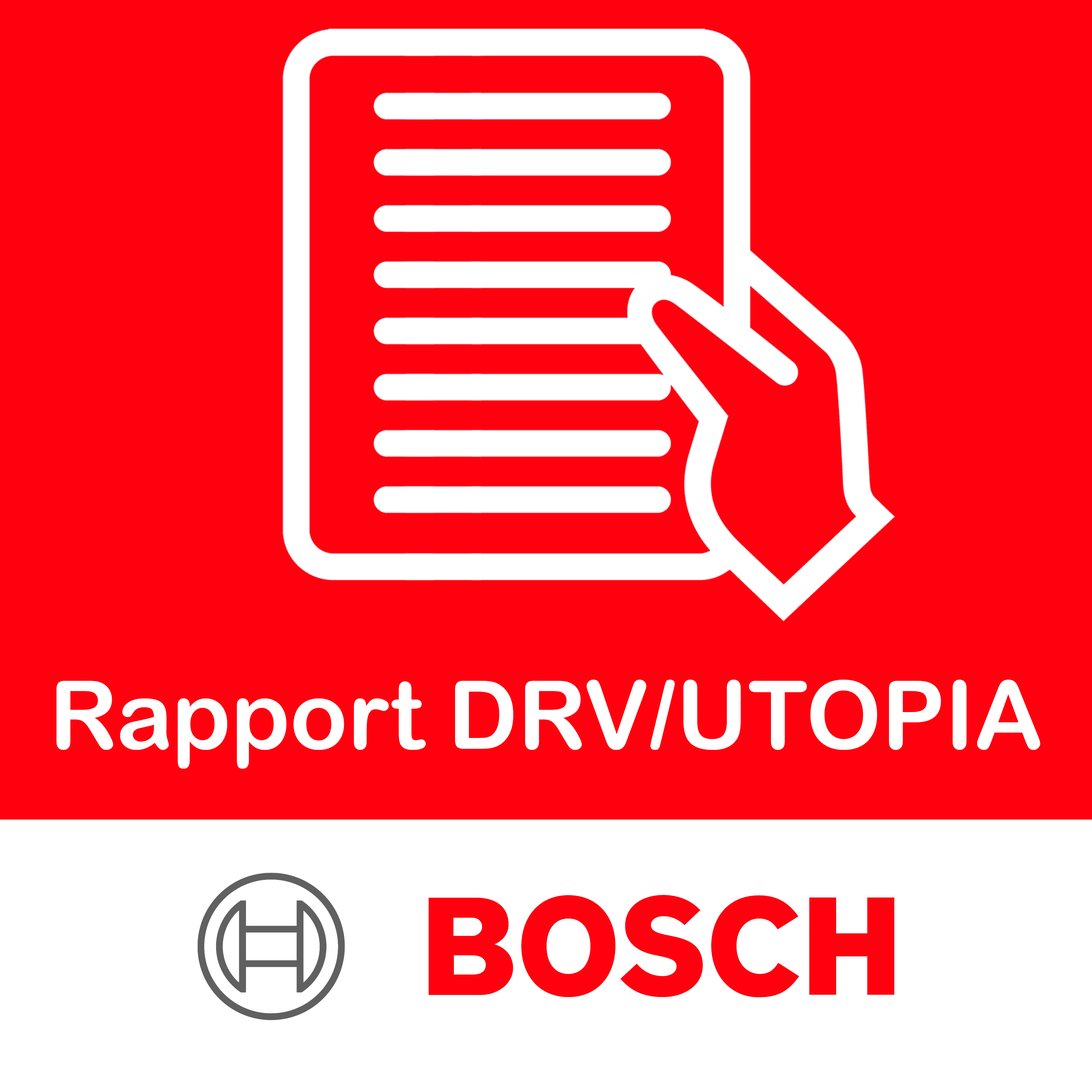
<style>
.page{position:relative;width:1092px;height:1092px;background:#ff000f}
.page>*{position:absolute;margin:0}
.t1{font:95px "ArialRoundedMTBold";color:#ffffff}
</style>
<div class="page">
<p class="t1" style="left:56px;top:680px;width:984px;height:89px">Rapport DRV/UTOPIA</p>
</div>
